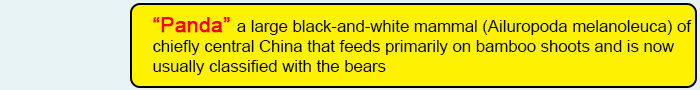
<style>
.page{position:relative;width:700px;height:90px;background:#fff200}
.page>*{position:absolute;margin:0}
.t1{font:16.7px "ArialMT";color:#020202}
.t2{font:20.8px "ArialMT";color:#fd010d;font-weight:bold}
</style>
<div class="page">
<p class="t1" style="left:153px;top:17px;width:539px;height:58px"><span class="t2">“Panda” </span>a large black-and-white mammal (Ailuropoda melanoleuca) of <br>chiefly central China that feeds primarily on bamboo shoots and is now <br>usually classified with the bears</p>
</div>
